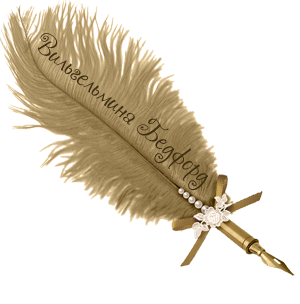
<style>
.page{position:relative;width:300px;height:304px;background:#ffffff}
.page>*{position:absolute;margin:0}
.t1{font:27.3px "Chocogirl";color:#3d2d11}
</style>
<div class="page">
<p class="t1" style="left:38px;top:33px;width:170px;height:158px;rotate:39deg">Вильгельмина Бедфорд</p>
</div>
